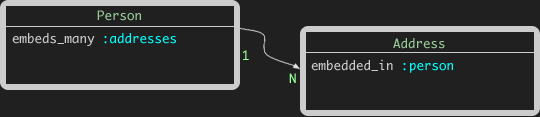
<style>
.page{position:relative;width:540px;height:117px;background:#202020}
.page>*{position:absolute;margin:0}
.t1{font:12.5px "Monaco";color:#99cc99}
.t2{font:12.5px "Monaco";color:#cccccc}
.t3{font:12.5px "Monaco";color:#00ffff}
.t4{font:12.5px "Monaco";color:#99ff99}
</style>
<div class="page">
<p class="t1" style="left:97px;top:10px;width:44px;height:11px">Person</p>
<p class="t2" style="left:12px;top:33px;width:164px;height:13px">embeds_many <span class="t3">:addresses</span></p>
<p class="t1" style="left:393px;top:38px;width:52px;height:11px">Address</p>
<p class="t4" style="left:243px;top:50px;width:6px;height:10px">1</p>
<p class="t2" style="left:311px;top:59px;width:142px;height:14px">embedded_in <span class="t3">:person</span></p>
<p class="t4" style="left:289px;top:73px;width:7px;height:10px">N</p>
</div>
